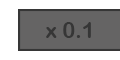
<style>
.page{position:relative;width:120px;height:60px;background:#656464}
.page>*{position:absolute;margin:0}
.t1{font:21.6px "ArialRoundedMTBold";color:#363636}
</style>
<div class="page">
<p class="t1" style="left:46px;top:22px;width:45px;height:16px">x 0.1</p>
</div>
